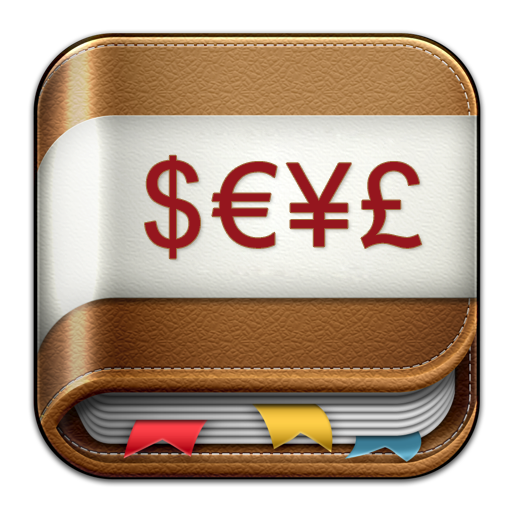
<style>
.page{position:relative;width:512px;height:512px;background:#ffffff}
.page>*{position:absolute;margin:0}
.t1{font:115.8px "ArialMT";letter-spacing:0.075em;color:#95161e}
</style>
<div class="page">
<p class="t1" style="left:145px;top:155px;width:277px;height:104px">$€¥£</p>
</div>
